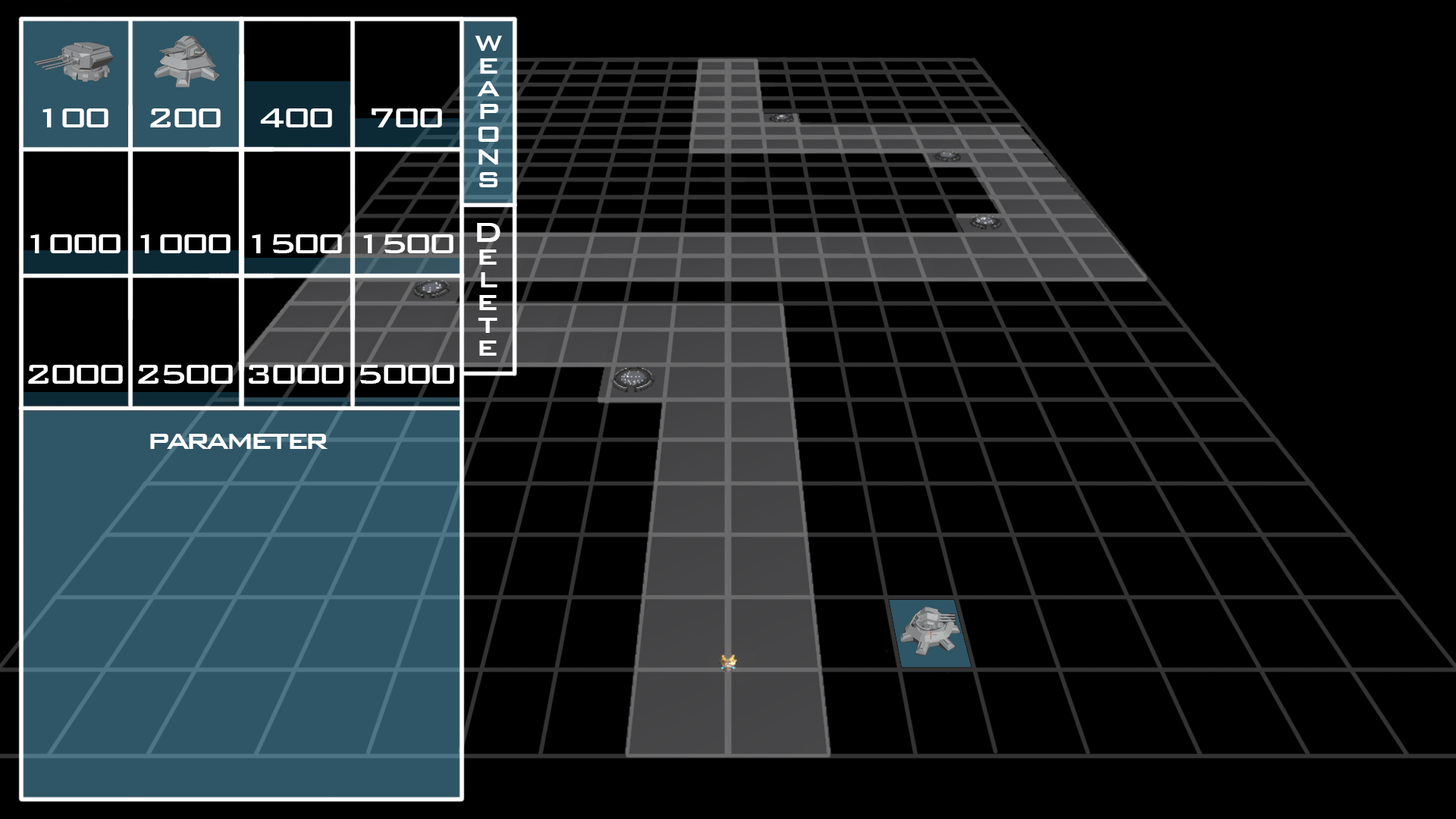
<style>
.page{position:relative;width:1456px;height:819px;background:#000000}
.page>*{position:absolute;margin:0}
.t1{font:36.4px/22.7px "BankGothicBT-Medium";letter-spacing:-0.1em;color:#ffffff}
.t2{font:36.4px "BankGothicBT-Medium";letter-spacing:-0.1em;color:#ffffff}
</style>
<div class="page">
<p class="t1" style="left:475px;top:36px;width:27px;height:151px;text-align:center">w<br>e<br>a<br>p<br>o<br>n<br>s</p>
<p class="t2" style="left:42px;top:108px;width:66px;height:19px">100</p>
<p class="t2" style="left:150px;top:108px;width:71px;height:19px">200</p>
<p class="t2" style="left:260px;top:108px;width:72px;height:19px">400</p>
<p class="t2" style="left:372px;top:108px;width:70px;height:19px">700</p>
<p class="t1" style="left:477px;top:223px;width:23px;height:133px;text-align:center">D<br>e<br>l<br>e<br>t<br>e</p>
<p class="t2" style="left:30px;top:234px;width:91px;height:19px">1000</p>
<p class="t2" style="left:140px;top:234px;width:91px;height:19px">1000</p>
<p class="t2" style="left:252px;top:234px;width:90px;height:19px">1500</p>
<p class="t2" style="left:363px;top:234px;width:90px;height:19px">1500</p>
<p class="t2" style="left:28px;top:365px;width:95px;height:19px">2000</p>
<p class="t2" style="left:138px;top:365px;width:95px;height:19px">2500</p>
<p class="t2" style="left:249px;top:365px;width:95px;height:19px">3000</p>
<p class="t2" style="left:360px;top:365px;width:94px;height:19px">5000</p>
<p class="t2" style="left:150px;top:434px;width:178px;height:15px">parameter</p>
</div>
